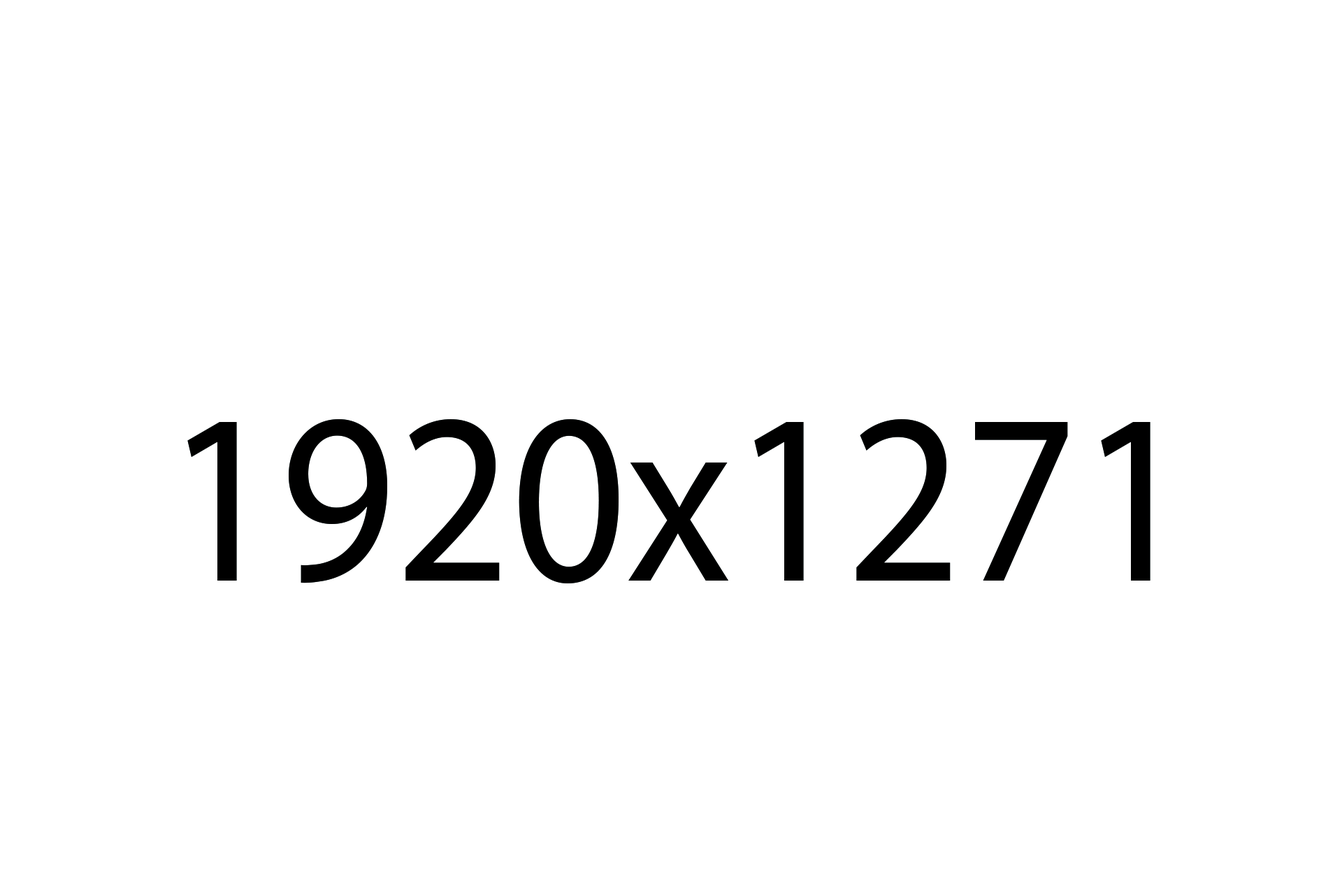
<style>
.page{position:relative;width:1342px;height:888px;background:#ffffff}
.page>*{position:absolute;margin:0}
.t1{font:244.7px "MyriadPro-Regular";color:#000000;scale:0.92 1}
</style>
<div class="page">
<p class="t1" style="left:187px;top:419px;width:964px;height:165px">1920x1271</p>
</div>
